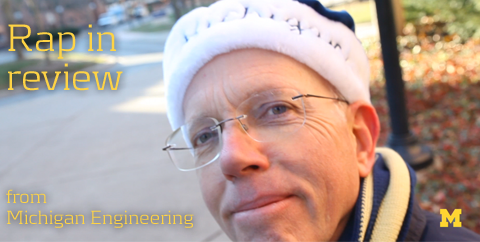
<style>
.page{position:relative;width:480px;height:242px}
.page>*{position:absolute;margin:0}
.t1{font:19.7px/20.5px "Kontrapunkt-Light";color:#fed345}
.t2{font:39.7px/50.5px "Kontrapunkt-Light";color:#fed345}
.t3{font:39.7px/39.5px "Kontrapunkt-Light";color:#fed345}
.t4{font:19.7px/50.5px "Kontrapunkt-Light";color:#fed345}
</style>
<div class="page">
<p class="t1" style="left:6px;top:24px;width:188px;height:204px"><span class="t2">Rap in <br></span><span class="t3">review<br><br></span><span class="t4">from<br></span>Michigan Engineering</p>
</div>
